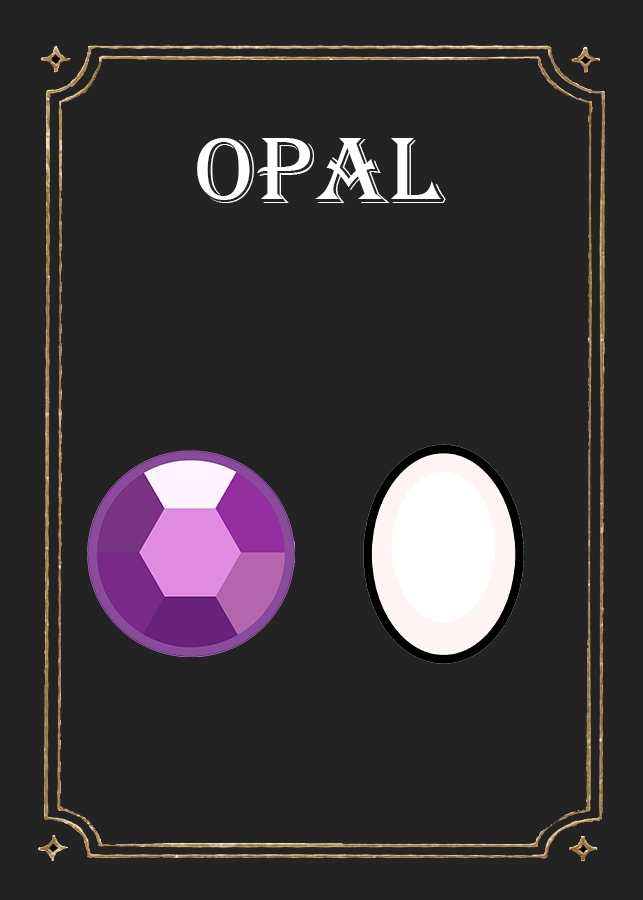
<style>
.page{position:relative;width:643px;height:900px;background:#232323}
.page>*{position:absolute;margin:0}
.t1{font:98.3px "Algerian";color:#ffffff}
</style>
<div class="page">
<p class="t1" style="left:197px;top:138px;width:249px;height:65px">Opal</p>
</div>
